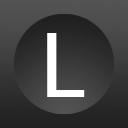
<style>
.page{position:relative;width:128px;height:128px}
.page>*{position:absolute;margin:0}
.t1{font:100px "Consolas";color:#ffffff}
</style>
<div class="page">
<p class="t1" style="left:47px;top:33px;width:38px;height:64px">L</p>
</div>
